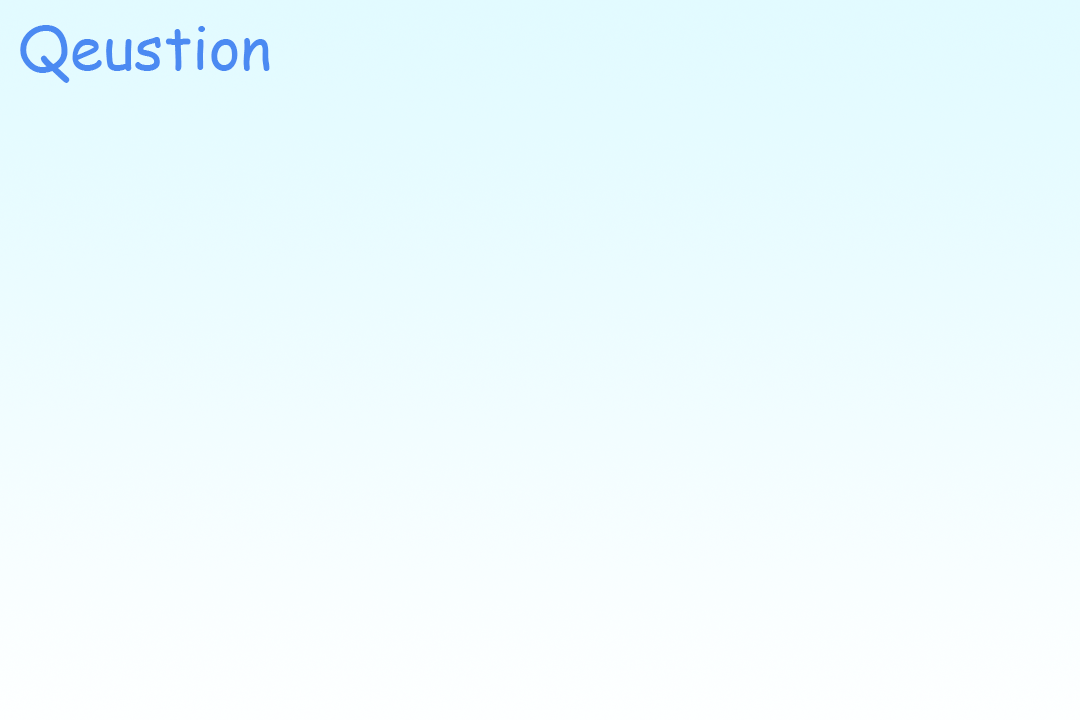
<style>
.page{position:relative;width:1080px;height:720px}
.page>*{position:absolute;margin:0}
.t1{font:60px "ComicSansMS";color:#4b8af2}
</style>
<div class="page">
<p class="t1" style="left:20px;top:25px;width:250px;height:58px">Qeustion</p>
</div>
